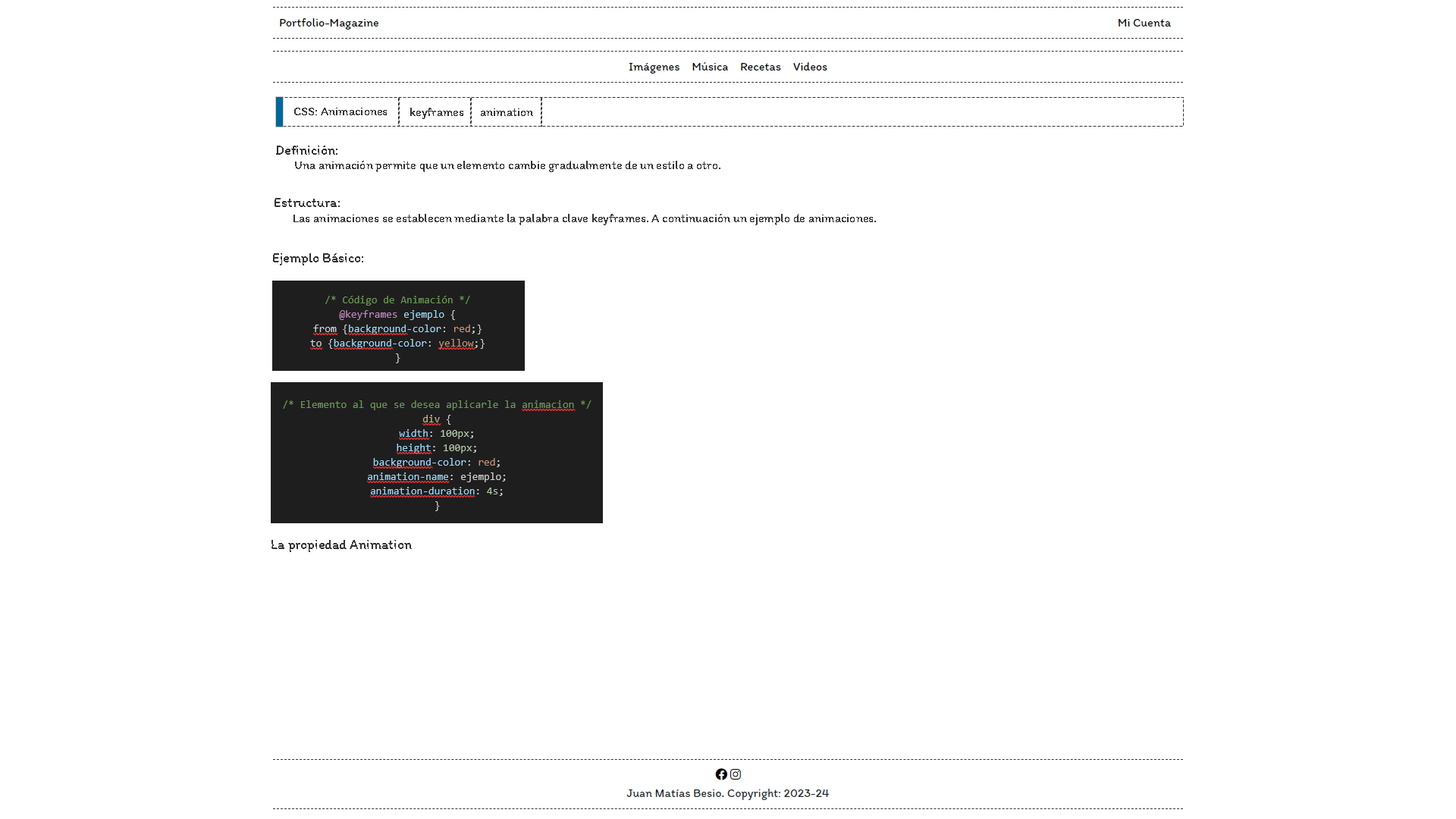
<style>
.page{position:relative;width:1456px;height:819px;background:#ffffff}
.page>*{position:absolute;margin:0}
.t1{font:12.1px "Itim-Regular";color:#333333}
.t2{font:13.6px "Itim-Regular";color:#333333}
</style>
<div class="page">
<p class="t1" style="left:294px;top:108px;width:93px;height:7px">CSS: Animaciones</p>
<p class="t1" style="left:410px;top:108px;width:53px;height:11px">keyframes</p>
<p class="t1" style="left:481px;top:108px;width:52px;height:8px">animation</p>
<p class="t2" style="left:276px;top:146px;width:61px;height:9px">Definición:</p>
<p class="t1" style="left:295px;top:161px;width:425px;height:11px">Una animación permite que un elemento cambie gradualmente de un estilo a otro.</p>
<p class="t2" style="left:275px;top:198px;width:65px;height:9px">Estructura:</p>
<p class="t1" style="left:293px;top:214px;width:583px;height:11px">Las animaciones se establecen mediante la palabra clave keyframes. A continuación un ejemplo de animaciones.</p>
<p class="t2" style="left:273px;top:253px;width:90px;height:12px">Ejemplo Básico:</p>
<p class="t2" style="left:271px;top:540px;width:141px;height:12px">La propiedad Animation</p>
</div>
